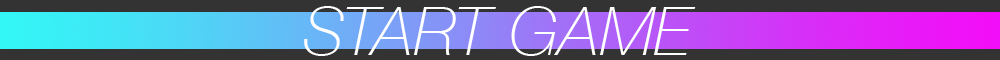
<style>
.page{position:relative;width:1000px;height:60px;background:#333333}
.page>*{position:absolute;margin:0}
.t1{font:16.1px "HelveticaNeue-ThinItalic";color:#ffffff}
</style>
<div class="page">
<p class="t1" style="left:304px;top:6px;width:392px;height:50px">START GAME</p>
</div>
